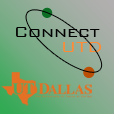
<style>
.page{position:relative;width:114px;height:114px}
.page>*{position:absolute;margin:0}
.t1{font:19px "BankGothic-Light";color:#030303}
.t2{font:19px "BankGothic-Light";color:#fe8c38}
</style>
<div class="page">
<p class="t1" style="left:16px;top:27px;width:84px;height:10px">Connect</p>
<p class="t2" style="left:63px;top:42px;width:39px;height:10px">UTD</p>
</div>
